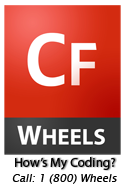
<style>
.page{position:relative;width:125px;height:188px;background:#ffffff}
.page>*{position:absolute;margin:0}
.t1{font:13.3px "MyriadPro-Regular";color:#040404}
.t2{font:10.8px "LucidaSansUnicode";color:#040404;font-style:italic}
</style>
<div class="page">
<p class="t1" style="left:15px;top:157px;width:100px;height:13px">How’s My Coding?</p>
<p class="t2" style="left:12px;top:174px;width:105px;height:10px">Call: 1 (800) Wheels</p>
</div>
